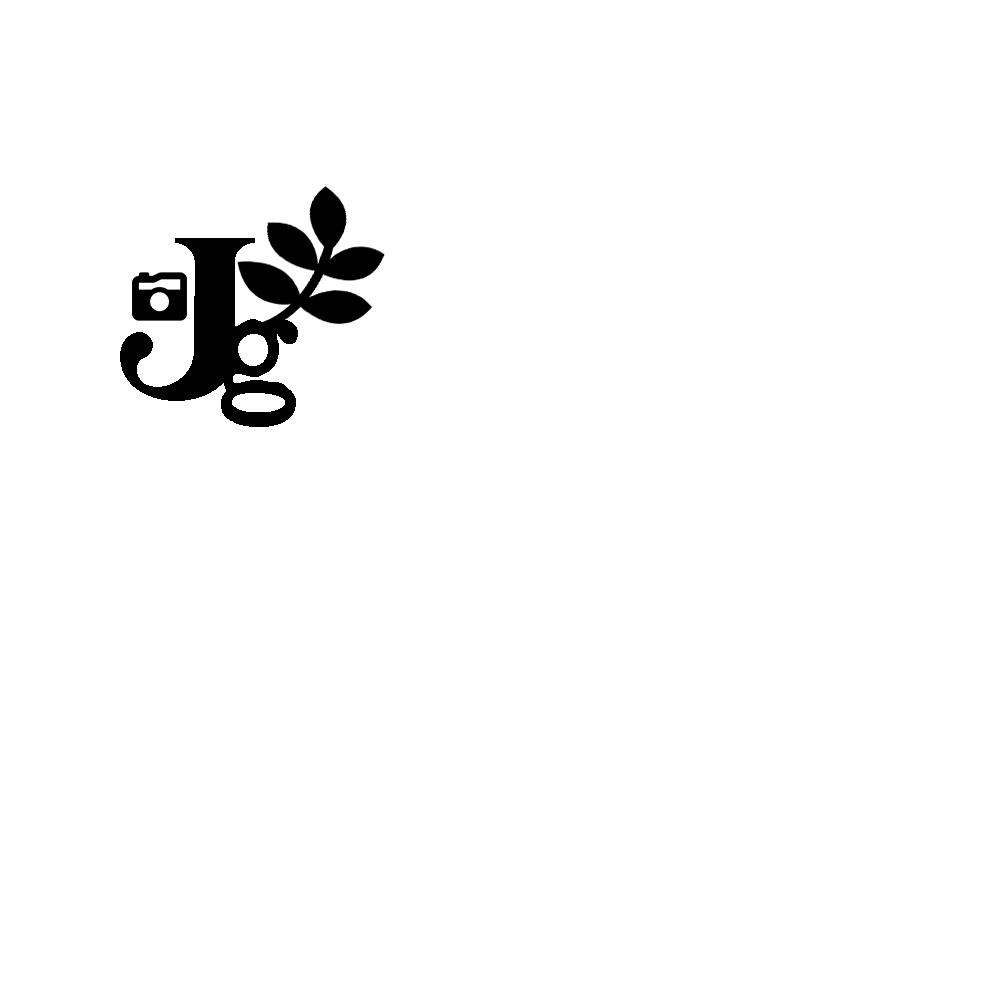
<style>
.page{position:relative;width:1000px;height:1000px;background:#ffffff}
.page>*{position:absolute;margin:0}
.t1{font:200px "BohemianSoul-Regular";color:#000000}
.t2{font:150px "AnotherTypewriter";color:#000000}
</style>
<div class="page">
<p class="t1" style="left:120px;top:238px;width:135px;height:163px">J</p>
<p class="t2" style="left:221px;top:319px;width:77px;height:108px">g</p>
</div>
